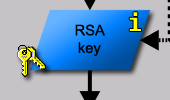
<style>
.page{position:relative;width:170px;height:100px;background:#c6c3c6}
.page>*{position:absolute;margin:0}
.t1{font:24px "Fixedsys";color:#ffff00}
.t2{font:14.7px "ArialMT";color:#000000}
</style>
<div class="page">
<p class="t1" style="left:129px;top:12px;width:12px;height:19px">i</p>
<p class="t2" style="left:75px;top:24px;width:30px;height:33px;text-align:center">RSA<br>key</p>
</div>
